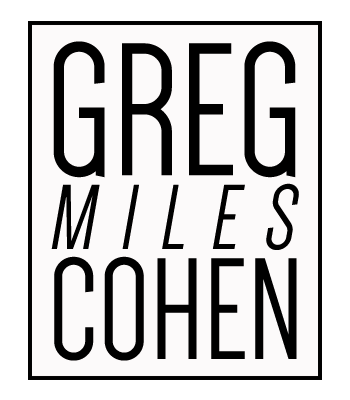
<style>
.page{position:relative;width:350px;height:400px;background:#fcfafa}
.page>*{position:absolute;margin:0}
.t1{font:195px "Dense-Regular";color:#000000}
.t2{font:95px "Dense-Regular";color:#000000;font-style:italic}
.t3{font:149px "Dense-Regular";color:#000000}
</style>
<div class="page">
<p class="t1" style="left:53px;top:41px;width:243px;height:137px">GREG</p>
<p class="t2" style="left:51px;top:183px;width:248px;height:67px">M  I  L  E  S</p>
<p class="t3" style="left:54px;top:256px;width:243px;height:105px">COHEN</p>
</div>
